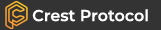
<style>
.page{position:relative;width:161px;height:30px;background:#333333}
.page>*{position:absolute;margin:0}
.t1{font:16px "Montserrat-SemiBold";color:#ffffff}
</style>
<div class="page">
<p class="t1" style="left:32px;top:9px;width:116px;height:13px">Crest Protocol</p>
</div>
